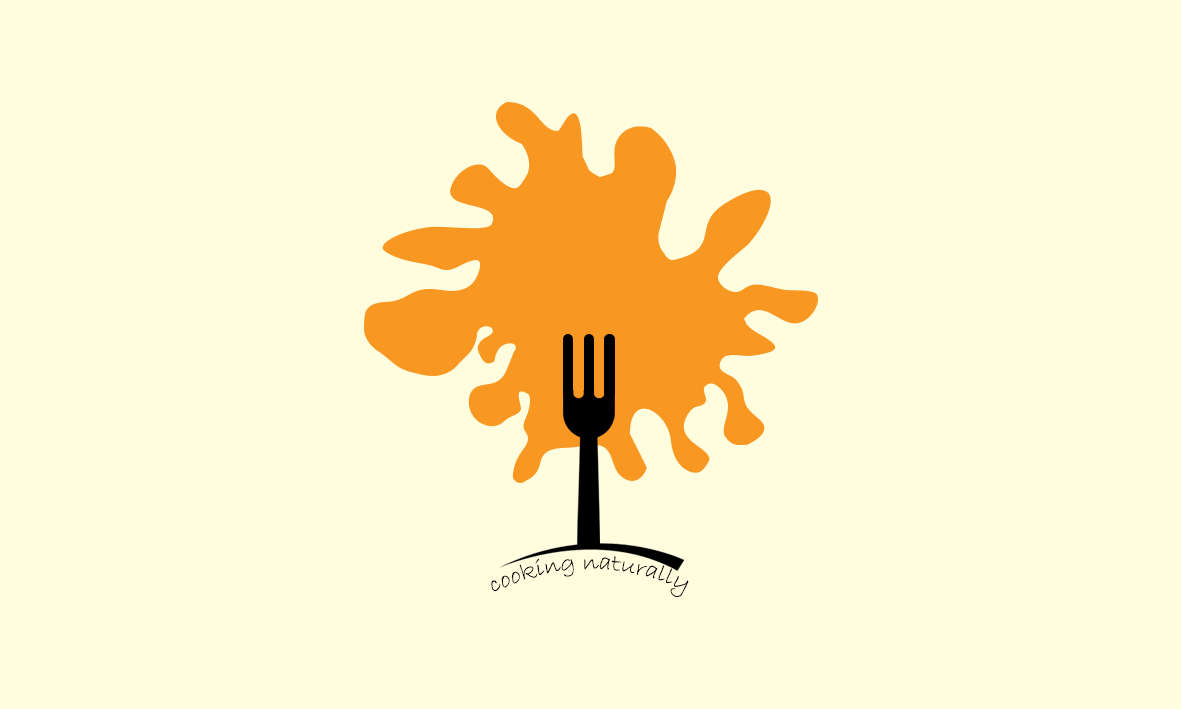
<style>
.page{position:relative;width:1181px;height:709px;background:#fffdde}
.page>*{position:absolute;margin:0}
.t1{font:23.9px "BradleyHandITC";color:#000000}
</style>
<div class="page">
<p class="t1" style="left:491px;top:556px;width:198px;height:41px">cooking naturally</p>
</div>
